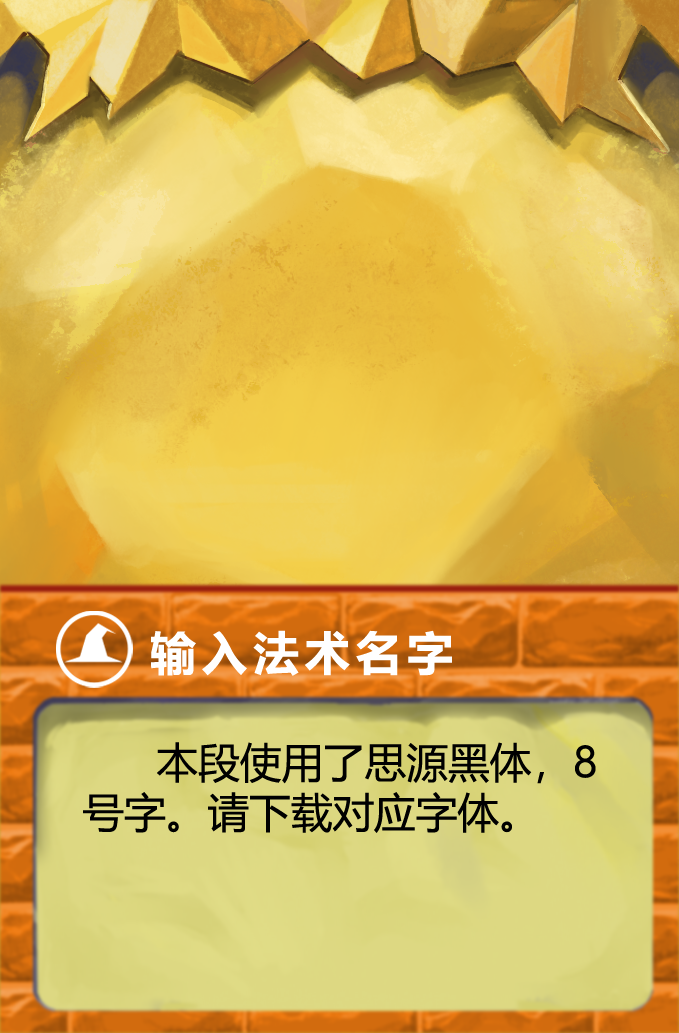
<style>
.page{position:relative;width:679px;height:1033px}
.page>*{position:absolute;margin:0}
.t1{font:45.8px "MicrosoftYaHei-Bold";letter-spacing:0.12em;color:#ffffff}
.t2{font:41.7px/50px "MicrosoftYaHei";color:#000000}
</style>
<div class="page">
<p class="t1" style="left:151px;top:630px;width:301px;height:46px">输入法术名字</p>
<p class="t2" style="left:83px;top:742px;width:513px;height:91px">本段使用了思源黑体，8<br>号字。请下载对应字体。</p>
</div>
